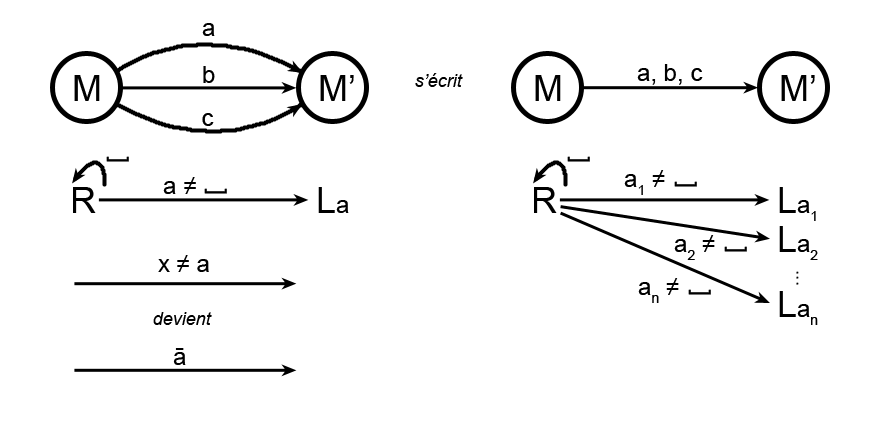
<style>
.page{position:relative;width:881px;height:421px;background:#ffffff}
.page>*{position:absolute;margin:0}
.t1{font:24px "ArialMT";color:#000000}
.t2{font:36px "ArialMT";color:#000000}
.t3{font:18px "Arial-ItalicMT";color:#000000}
</style>
<div class="page">
<p class="t1" style="left:202px;top:23px;width:13px;height:13px">a</p>
<p class="t1" style="left:637px;top:64px;width:66px;height:21px">a, b, c</p>
<p class="t2" style="left:74px;top:75px;width:26px;height:26px">M</p>
<p class="t1" style="left:203px;top:66px;width:12px;height:17px">b</p>
<p class="t2" style="left:320px;top:75px;width:34px;height:26px">M’</p>
<p class="t3" style="left:415px;top:73px;width:48px;height:14px">s’écrit</p>
<p class="t2" style="left:535px;top:75px;width:26px;height:26px">M</p>
<p class="t2" style="left:781px;top:75px;width:34px;height:26px">M’</p>
<p class="t1" style="left:202px;top:113px;width:12px;height:13px">c</p>
<p class="t1" style="left:106px;top:156px;width:23px;height:6px;rotate:-90deg">[</p>
<p class="t1" style="left:567px;top:156px;width:23px;height:6px;rotate:-90deg">[</p>
<p class="t1" style="left:624px;top:170px;width:41px;height:25px">a1 ≠</p>
<p class="t1" style="left:163px;top:177px;width:33px;height:17px">a ≠</p>
<p class="t1" style="left:674px;top:181px;width:23px;height:6px;rotate:-90deg">[</p>
<p class="t2" style="left:73px;top:187px;width:23px;height:26px">R</p>
<p class="t1" style="left:204px;top:188px;width:23px;height:6px;rotate:-90deg">[</p>
<p class="t2" style="left:318px;top:187px;width:31px;height:26px">L<span class="t1">a</span></p>
<p class="t2" style="left:534px;top:187px;width:23px;height:26px">R</p>
<p class="t1" style="left:779px;top:187px;width:37px;height:34px"><span class="t2">L</span>a1</p>
<p class="t1" style="left:779px;top:226px;width:39px;height:34px"><span class="t2">L</span>a2</p>
<p class="t1" style="left:674px;top:235px;width:41px;height:25px">a2 ≠</p>
<p class="t1" style="left:724px;top:246px;width:23px;height:6px;rotate:-90deg">[</p>
<p class="t1" style="left:158px;top:255px;width:51px;height:17px">x ≠ a</p>
<p class="t1" style="left:638px;top:278px;width:41px;height:25px">an ≠</p>
<p class="t2" style="left:796px;top:271px;width:3px;height:14px;rotate:90deg">...</p>
<p class="t1" style="left:688px;top:289px;width:23px;height:6px;rotate:-90deg">[</p>
<p class="t1" style="left:779px;top:291px;width:39px;height:34px"><span class="t2">L</span>an</p>
<p class="t3" style="left:153px;top:312px;width:59px;height:13px">devient</p>
<p class="t1" style="left:173px;top:348px;width:13px;height:17px">ā</p>
</div>
